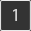
<style>
.page{position:relative;width:31px;height:31px;background:#333333}
.page>*{position:absolute;margin:0}
.t1{font:18px "MyriadPro-Regular";color:#d3d3d3}
</style>
<div class="page">
<p class="t1" style="left:13px;top:9px;width:4px;height:12px">1</p>
</div>
